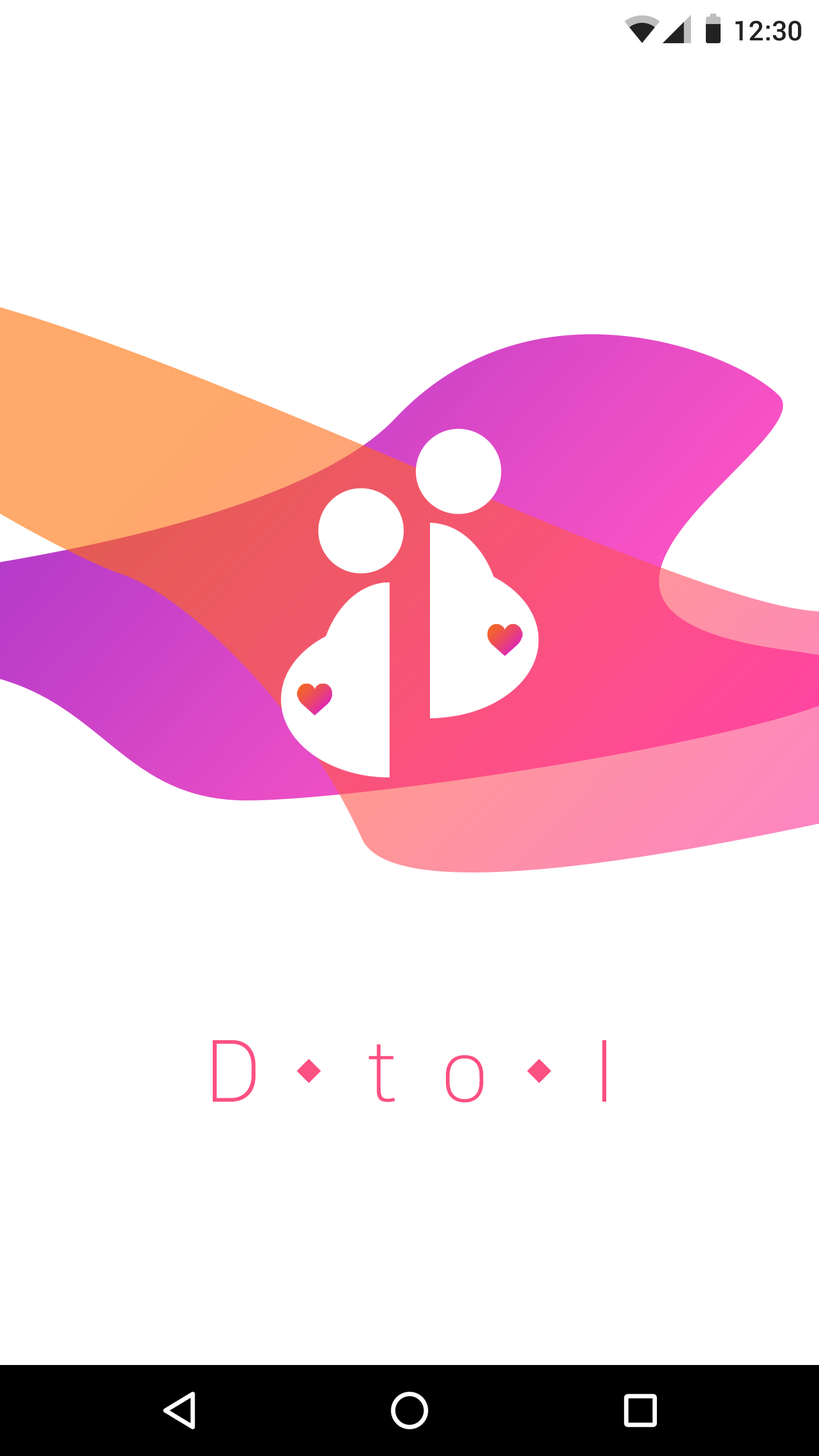
<style>
.page{position:relative;width:819px;height:1456px;background:#ffffff}
.page>*{position:absolute;margin:0}
.t1{font:27.3px "Roboto-Medium";color:#222222}
.t2{font:85.3px "NanumSquareL";letter-spacing:0.5em;color:#fb5082}
</style>
<div class="page">
<p class="t1" style="left:735px;top:20px;width:66px;height:21px">12:30</p>
<p class="t2" style="left:213px;top:1040px;width:393px;height:63px">D to I</p>
</div>
